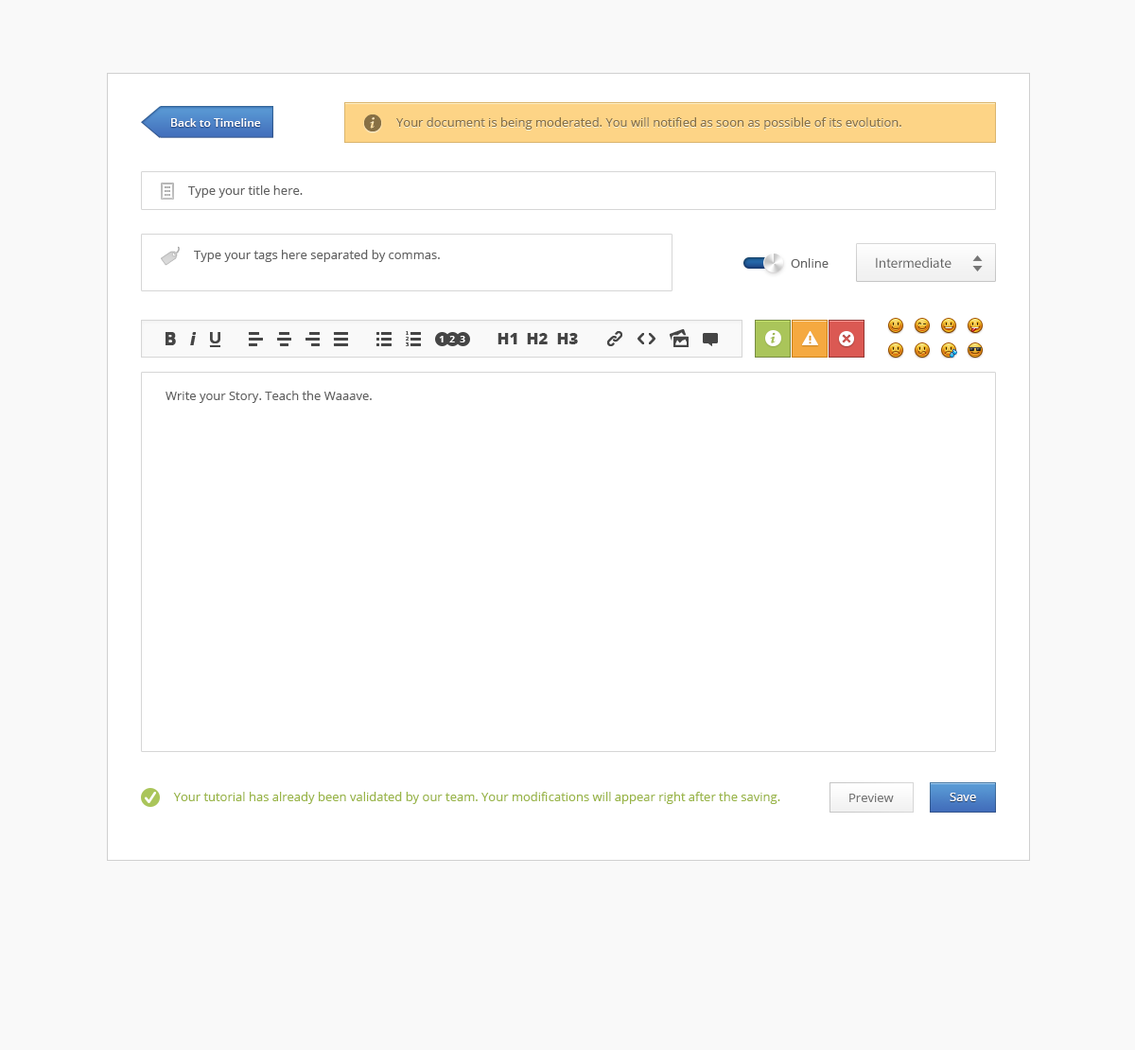
<style>
.page{position:relative;width:1135px;height:1050px;background:#ffffff}
.page>*{position:absolute;margin:0}
.t1{font:11.4px "OpenSans-Semibold";color:#ffffff}
.t2{font:12.3px "OpenSans";color:#877044}
.t3{font:12.3px "OpenSans";color:#606060}
.t4{font:14.2px "MyriadPro-Regular";color:#606060}
.t5{font:9.5px "OpenSans-Bold";color:#ffffff}
.t6{font:16.1px "OpenSans-Extrabold";color:#454545}
.t7{font:12.3px "OpenSans";color:#99b546}
.t8{font:12.3px "OpenSans";color:#757575}
.t9{font:12.3px "OpenSans";color:#ffffff}
</style>
<div class="page">
<p class="t1" style="left:171px;top:118px;width:90px;height:9px">Back to Timeline</p>
<p class="t2" style="left:396px;top:117px;width:506px;height:13px">Your document is being moderated. You will notified as soon as possible of its evolution.</p>
<p class="t3" style="left:188px;top:185px;width:115px;height:13px">Type your title here.</p>
<p class="t3" style="left:194px;top:250px;width:246px;height:12px">Type your tags here separated by commas.</p>
<p class="t4" style="left:876px;top:257px;width:76px;height:11px">Intermediate</p>
<p class="t3" style="left:791px;top:258px;width:38px;height:10px">Online</p>
<p class="t5" style="left:439px;top:336px;width:5px;height:7px">1</p>
<p class="t5" style="left:449px;top:336px;width:6px;height:7px">2</p>
<p class="t5" style="left:460px;top:336px;width:6px;height:7px">3</p>
<p class="t6" style="left:498px;top:333px;width:20px;height:11px">H1</p>
<p class="t6" style="left:527px;top:333px;width:21px;height:11px">H2</p>
<p class="t6" style="left:557px;top:333px;width:21px;height:11px">H3</p>
<p class="t3" style="left:166px;top:391px;width:206px;height:12px">Write your Story. Teach the Waaave.</p>
<p class="t7" style="left:173px;top:792px;width:608px;height:12px">Your tutorial has already been validated by our team. Your modifications will appear right after the saving.</p>
<p class="t8" style="left:850px;top:794px;width:44px;height:8px">Preview</p>
<p class="t9" style="left:950px;top:793px;width:26px;height:8px">Save</p>
</div>
